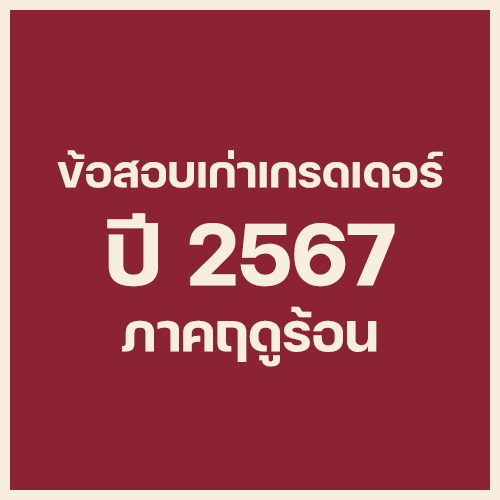
<style>
.page{position:relative;width:500px;height:500px;background:#8b2332}
.page>*{position:absolute;margin:0}
.t1{font:60px "FCMinimalBold";color:#f8eedf}
.t2{font:120px "FCMinimalBold";color:#f8eedf}
.t3{font:72px "FCMinimalBold";color:#f8eedf}
</style>
<div class="page">
<p class="t1" style="left:57px;top:150px;width:386px;height:38px">ข้อสอบเก่าเกรดเดอร์</p>
<p class="t2" style="left:107px;top:213px;width:288px;height:74px">ปี 2567</p>
<p class="t3" style="left:122px;top:306px;width:255px;height:61px">ภาคฤดูร้อน</p>
</div>
